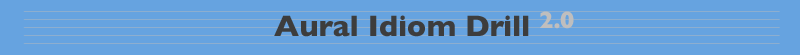
<style>
.page{position:relative;width:800px;height:55px;background:#66a3e0}
.page>*{position:absolute;margin:0}
.t1{font:29.9px "GillSans-Bold";color:#3d3d3d}
.t2{font:24px "GillSans-Bold";color:#bfbebe}
</style>
<div class="page">
<p class="t1" style="left:274px;top:11px;width:300px;height:26px">Aural Idiom Drill <span class="t2">2.0</span></p>
</div>
